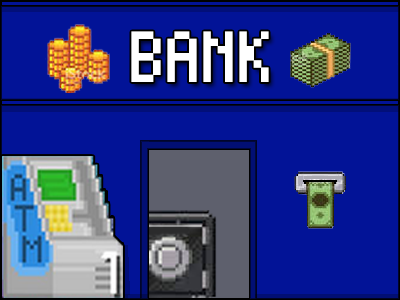
<style>
.page{position:relative;width:400px;height:300px;background:#021397}
.page>*{position:absolute;margin:0}
.t1{font:72px "PixelMplus10-Regular";color:#ffffff}
</style>
<div class="page">
<p class="t1" style="left:131px;top:31px;width:138px;height:51px">BANK</p>
</div>
